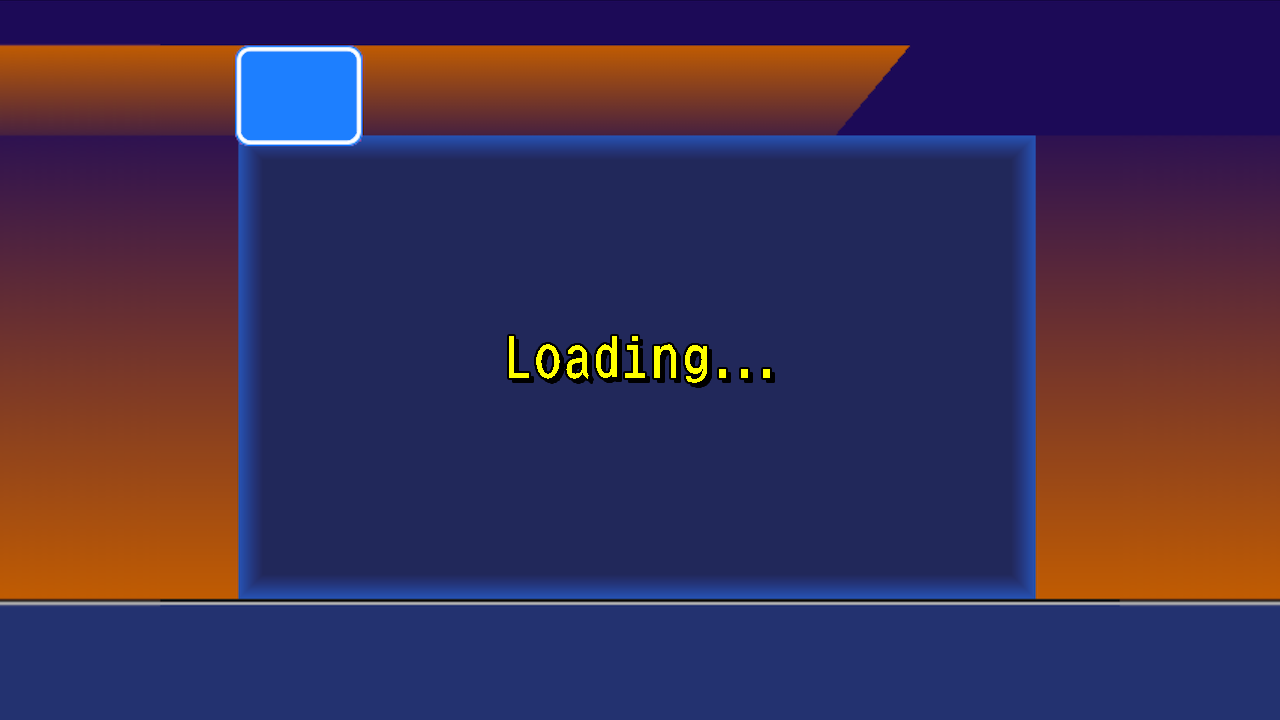
<style>
.page{position:relative;width:1280px;height:720px;background:#21285a}
.page>*{position:absolute;margin:0}
.t1{font:60px "STAR4";letter-spacing:0.05em;color:#ffff00}
</style>
<div class="page">
<p class="t1" style="left:509px;top:336px;width:261px;height:47px">Loading...</p>
</div>
